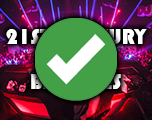
<style>
.page{position:relative;width:152px;height:120px;background:#43a047}
.page>*{position:absolute;margin:0}
.t1{font:22.1px/44.3px "Bauhaus93"}
</style>
<div class="page">
<p class="t1" style="left:6px;top:29px;width:141px;height:60px;text-align:center">21ST CENTURY<br>BASSLINES</p>
</div>
